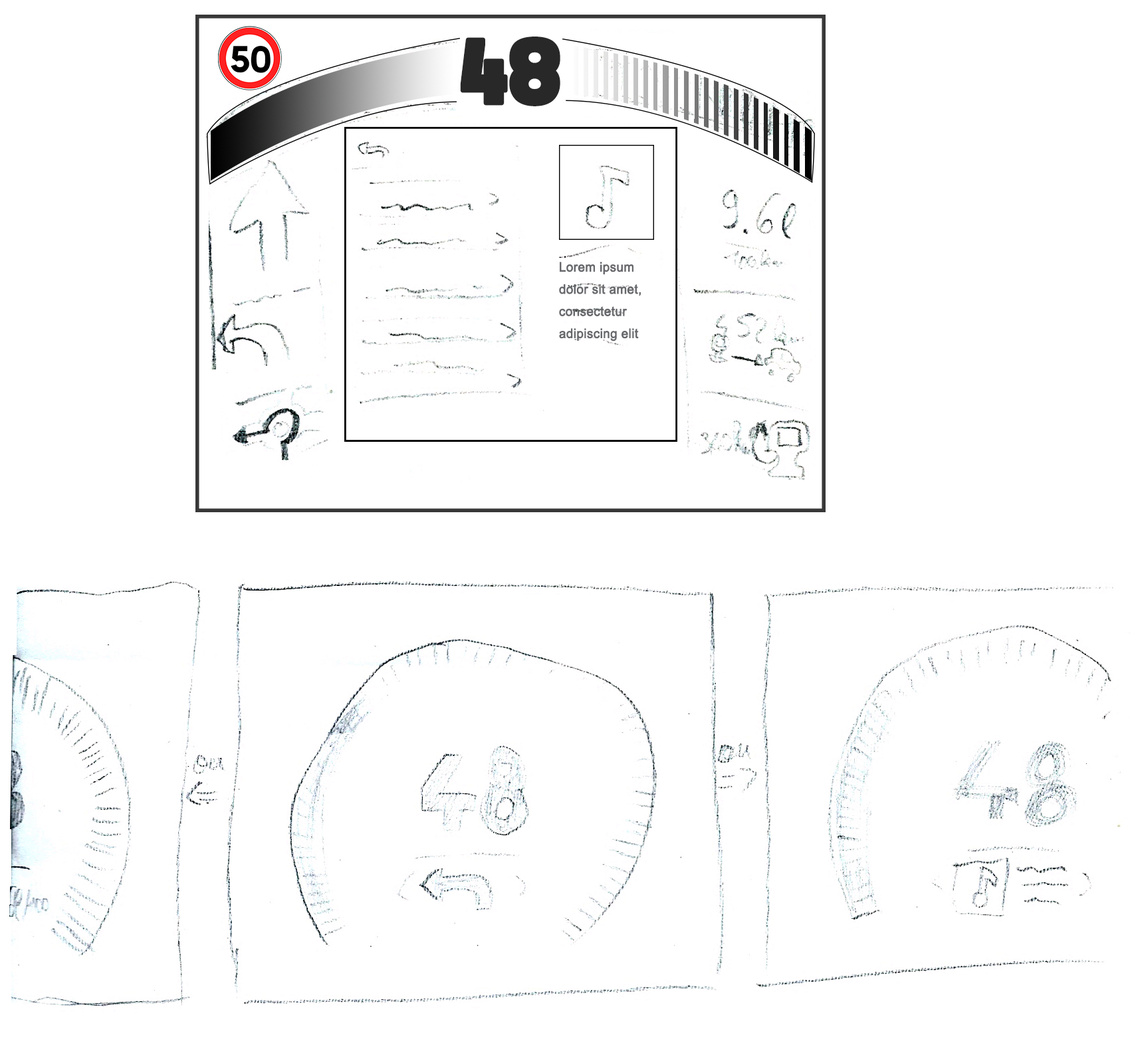
<style>
.page{position:relative;width:1130px;height:1055px;background:#ffffff}
.page>*{position:absolute;margin:0}
.t1{font:65px "moon_get-Heavy";color:#282828;font-weight:bold;scale:0.95 1}
.t2{font:13px/22.2px "ArialMT";color:#67686c;font-weight:bold;scale:0.95 1}
</style>
<div class="page">
<p class="t1" style="left:460px;top:37px;width:100px;height:69px">48</p>
<p class="t2" style="left:559px;top:262px;width:82px;height:80px">Lorem ipsum<br>dolor sit amet, consectetur<br>adipiscing elit</p>
</div>
